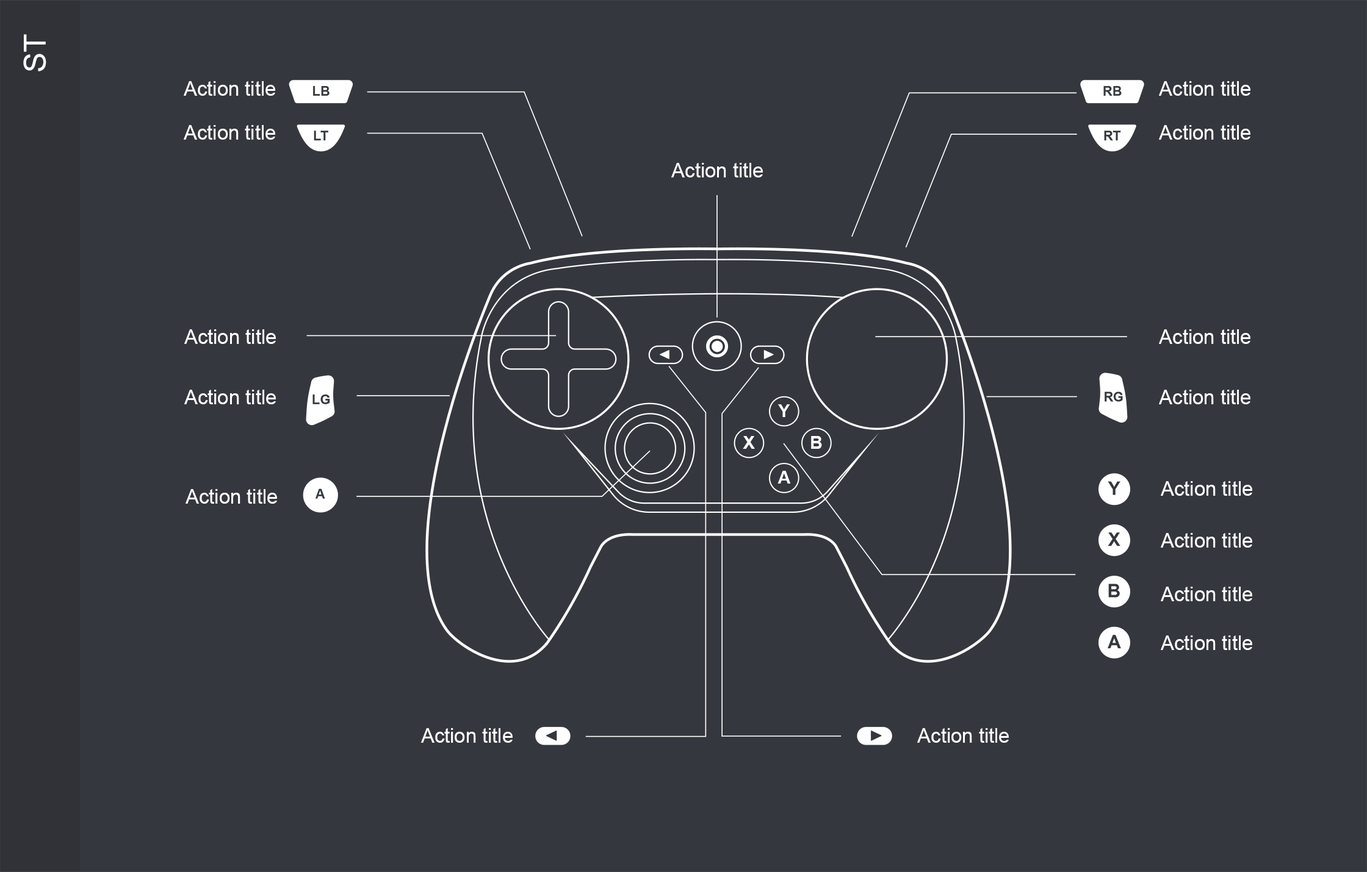
<style>
.page{position:relative;width:1367px;height:872px;background:#35373e}
.page>*{position:absolute;margin:0}
.t1{font:30.5px "ArialMT";color:#ffffff}
.t2{font:20px "ArialMT";color:#ffffff}
.t3{font:17.9px "Arial-BoldMT";color:#ffffff}
</style>
<div class="page">
<p class="t1" style="left:23px;top:34px;width:23px;height:37px;rotate:-90deg">ST</p>
<p class="t2" style="left:184px;top:81px;width:91px;height:15px">Action title</p>
<p class="t2" style="left:1159px;top:81px;width:91px;height:15px">Action title</p>
<p class="t2" style="left:184px;top:125px;width:91px;height:15px">Action title</p>
<p class="t2" style="left:1159px;top:125px;width:91px;height:15px">Action title</p>
<p class="t2" style="left:671px;top:163px;width:92px;height:15px">Action title</p>
<p class="t2" style="left:184px;top:329px;width:92px;height:15px">Action title</p>
<p class="t2" style="left:1159px;top:329px;width:91px;height:15px">Action title</p>
<p class="t2" style="left:184px;top:390px;width:92px;height:15px">Action title</p>
<p class="t2" style="left:1159px;top:390px;width:91px;height:15px">Action title</p>
<p class="t3" style="left:778px;top:405px;width:12px;height:12px">Y</p>
<p class="t3" style="left:743px;top:436px;width:12px;height:13px">X</p>
<p class="t3" style="left:811px;top:436px;width:11px;height:13px">B</p>
<p class="t3" style="left:777px;top:471px;width:14px;height:13px">A</p>
<p class="t2" style="left:1160px;top:481px;width:92px;height:15px">Action title</p>
<p class="t2" style="left:185px;top:489px;width:92px;height:15px">Action title</p>
<p class="t2" style="left:1160px;top:533px;width:92px;height:15px">Action title</p>
<p class="t2" style="left:1160px;top:587px;width:92px;height:15px">Action title</p>
<p class="t2" style="left:1160px;top:636px;width:92px;height:14px">Action title</p>
<p class="t2" style="left:421px;top:728px;width:92px;height:15px">Action title</p>
<p class="t2" style="left:917px;top:728px;width:92px;height:15px">Action title</p>
</div>
